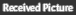
<style>
.page{position:relative;width:76px;height:15px;background:#333333}
.page>*{position:absolute;margin:0}
.t1{font:10.2px "Amira-Roman";color:#ffffff}
</style>
<div class="page">
<p class="t1" style="left:3px;top:3px;width:70px;height:8px">Received Picture</p>
</div>
